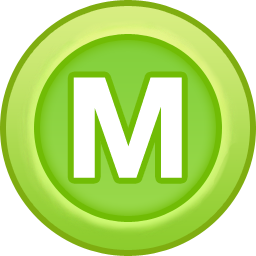
<style>
.page{position:relative;width:256px;height:256px;background:#ffffff}
.page>*{position:absolute;margin:0}
.t1{font:140px "HelveticaNeueLTStd-Bd";letter-spacing:0.05em;color:#ffffff}
</style>
<div class="page">
<p class="t1" style="left:73px;top:77px;width:109px;height:101px">M</p>
</div>
